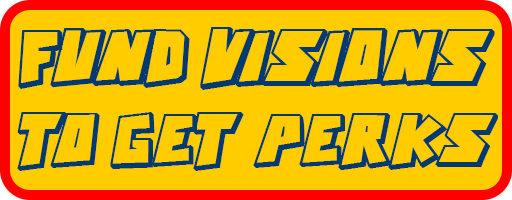
<style>
.page{position:relative;width:512px;height:200px;background:#ffcc00}
.page>*{position:absolute;margin:0}
.t1{font:36px "ActionComics";color:#003a70}
.t2{font:34px "ActionComics";color:#003a70}
</style>
<div class="page">
<p class="t1" style="left:18px;top:27px;width:477px;height:63px">FUND VISIONS</p>
<p class="t2" style="left:17px;top:112px;width:481px;height:59px">TO GET PERKS</p>
</div>
